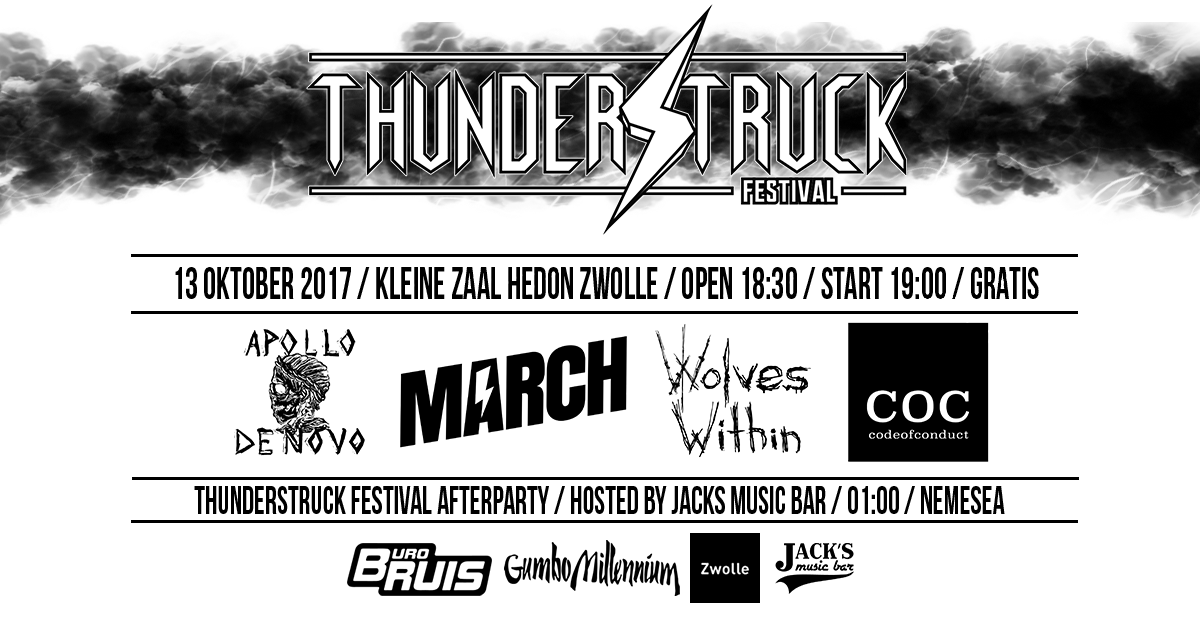
<style>
.page{position:relative;width:1200px;height:628px;background:#ffffff}
.page>*{position:absolute;margin:0}
.t1{font:45.2px "BebasNeue";color:#000000;text-transform:uppercase;scale:0.74 1}
.t2{font:40.2px "BebasNeue";color:#000000;text-transform:uppercase;scale:0.74 1}
</style>
<div class="page">
<p class="t1" style="left:175px;top:267px;width:864px;height:32px">13 oktober 2017 / kleine zaal hedon zwolle / open 18:30 / start 19:00 / gratis</p>
<p class="t2" style="left:194px;top:486px;width:811px;height:28px">thunderstruck festival afterparty / hosted by jacks music bar / 01:00 / nemesea</p>
</div>
